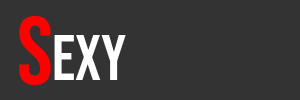
<style>
.page{position:relative;width:300px;height:100px;background:#333333}
.page>*{position:absolute;margin:0}
.t1{font:96.5px "BebasNeue-Regular";letter-spacing:-0.025em;color:#ff0000}
.t2{font:64px "BebasNeue-Regular";letter-spacing:-0.005em;color:#ffffff}
</style>
<div class="page">
<p class="t1" style="left:19px;top:16px;width:32px;height:69px">S</p>
<p class="t2" style="left:54px;top:35px;width:72px;height:45px">exy</p>
</div>
